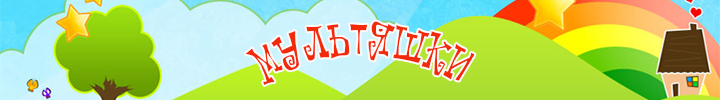
<style>
.page{position:relative;width:720px;height:100px}
.page>*{position:absolute;margin:0}
.t1{font:46.2px "KotLeopold";color:#f22a09;scale:0.82 1}
</style>
<div class="page">
<p class="t1" style="left:245px;top:21px;width:230px;height:65px">МУЛЬТЯШКИ</p>
</div>
